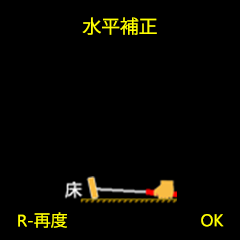
<style>
.page{position:relative;width:240px;height:240px;background:#000000}
.page>*{position:absolute;margin:0}
.t1{font:18.5px "KozGoPr6N-Regular";color:#ffff00}
.t2{font:16.4px "MicrosoftNewTaiLue";color:#ffff00;scale:1.03 1}
.t3{font:16.4px "KozGoPr6N-Regular";color:#ffff00;scale:1.03 1}
.t4{font:16.8px "MicrosoftNewTaiLue";color:#ffff00}
</style>
<div class="page">
<p class="t1" style="left:82px;top:17px;width:75px;height:18px">水平補正</p>
<p class="t2" style="left:18px;top:212px;width:49px;height:16px">R-<span class="t3">再度</span></p>
<p class="t4" style="left:201px;top:214px;width:23px;height:13px">OK</p>
</div>
